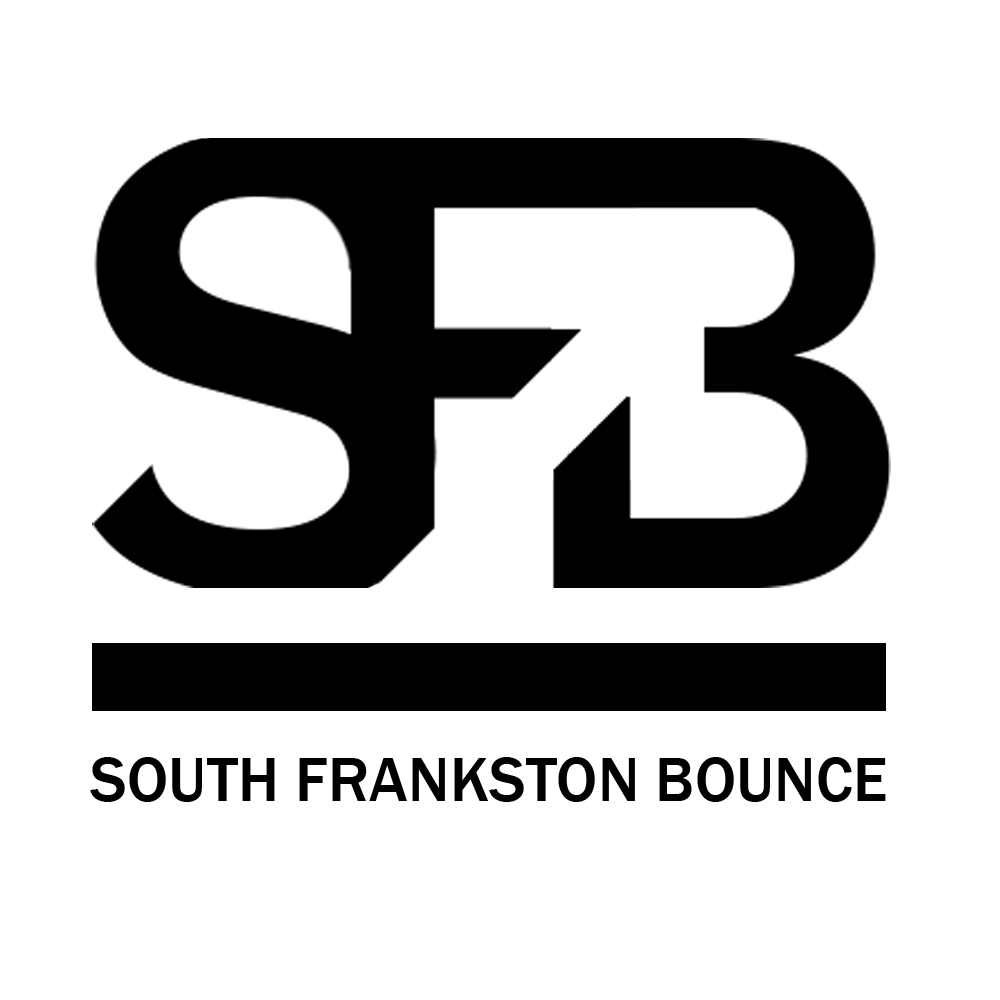
<style>
.page{position:relative;width:1000px;height:1000px;background:#ffffff}
.page>*{position:absolute;margin:0}
.t1{font:64.3px "FranklinGothic-Medium";color:#000000}
</style>
<div class="page">
<p class="t1" style="left:90px;top:757px;width:796px;height:45px">SOUTH FRANKSTON BOUNCE</p>
</div>
